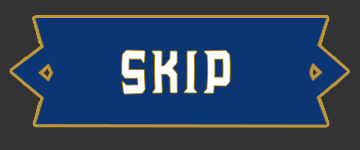
<style>
.page{position:relative;width:360px;height:150px;background:#0c3573}
.page>*{position:absolute;margin:0}
.t1{font:62.5px "Lorde-Havana";letter-spacing:0.1em;color:#ffffff;scale:0.75 1}
</style>
<div class="page">
<p class="t1" style="left:122px;top:50px;width:108px;height:44px">SKIP</p>
</div>
